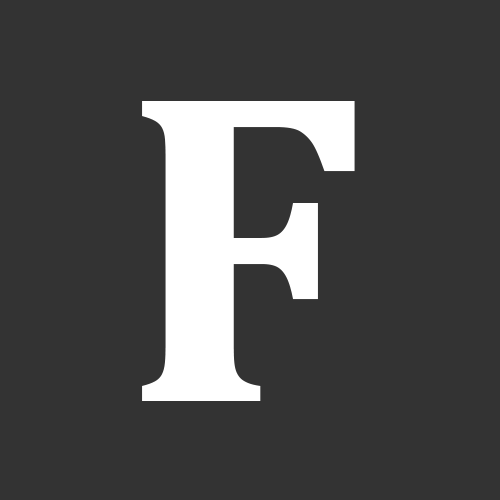
<style>
.page{position:relative;width:500px;height:500px;background:#333333}
.page>*{position:absolute;margin:0}
.t1{font:450px "Cambria-Bold";color:#ffffff}
</style>
<div class="page">
<p class="t1" style="left:142px;top:101px;width:213px;height:300px">F</p>
</div>
